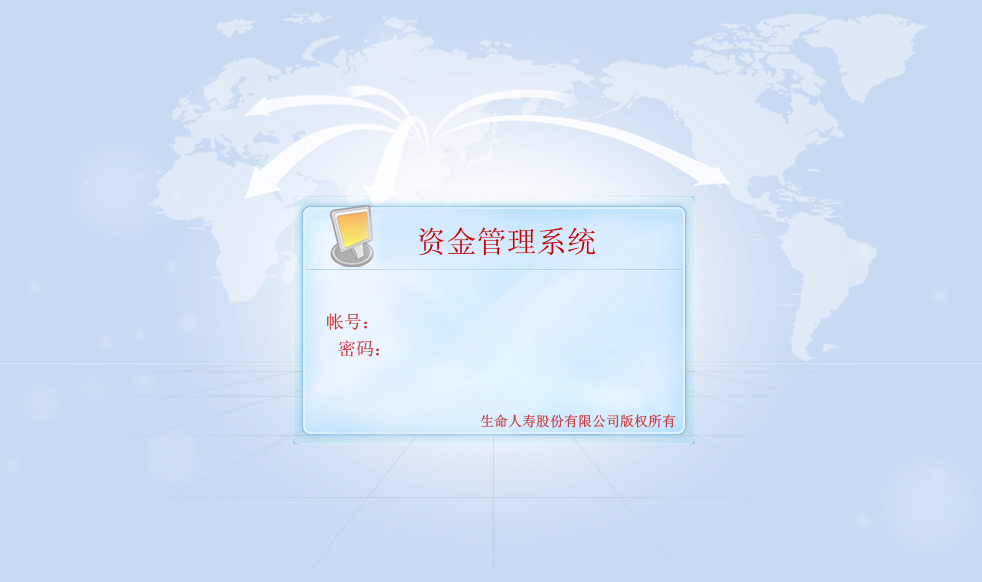
<style>
.page{position:relative;width:982px;height:582px;background:#c7daf2}
.page>*{position:absolute;margin:0}
.t1{font:30px "SimSun";color:#c40202}
.t2{font:18px "SimSun";color:#c73034}
.t3{font:14px "SimSun";color:#c83134}
</style>
<div class="page">
<p class="t1" style="left:419px;top:227px;width:177px;height:29px">资金管理系统</p>
<p class="t2" style="left:327px;top:313px;width:40px;height:17px">帐号：</p>
<p class="t2" style="left:338px;top:340px;width:41px;height:17px">密码：</p>
<p class="t3" style="left:480px;top:414px;width:196px;height:14px">生命人寿股份有限公司版权所有</p>
</div>
